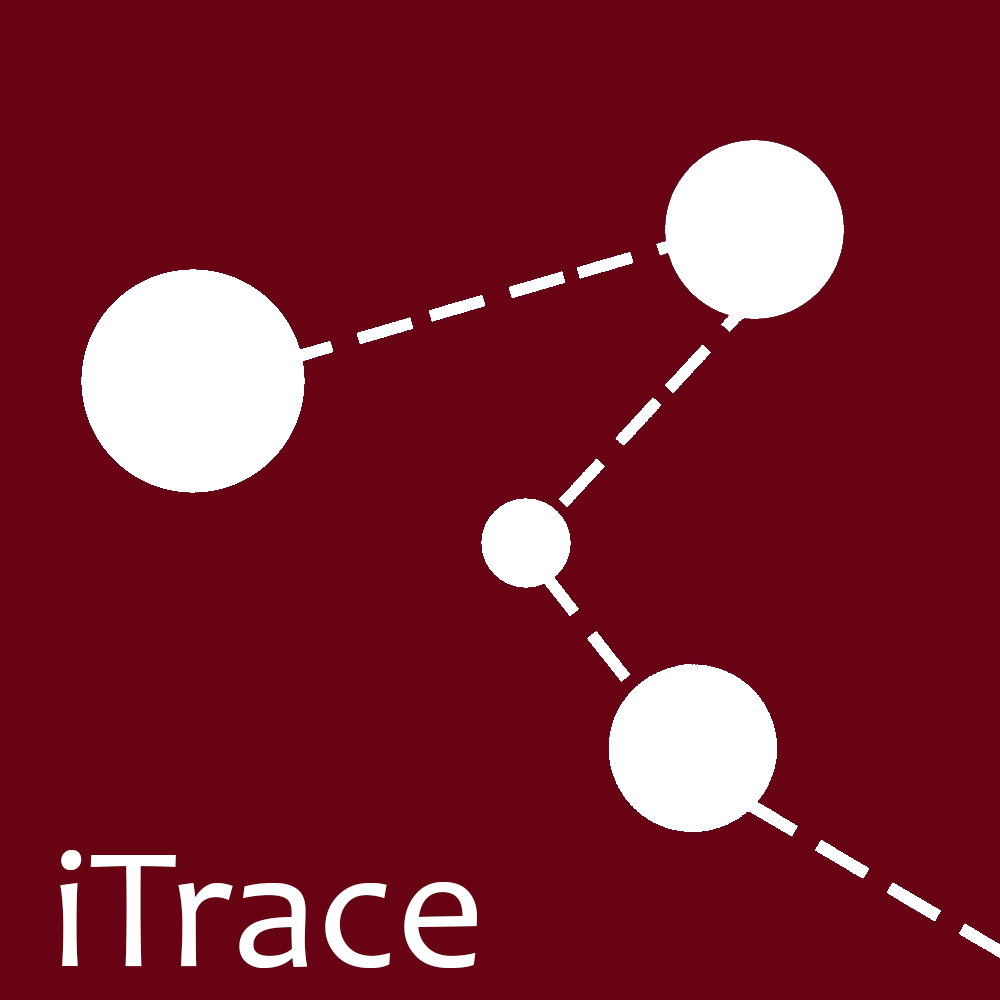
<style>
.page{position:relative;width:1000px;height:1000px;background:#680314}
.page>*{position:absolute;margin:0}
.t1{font:174px "Candara";color:#ffffff}
</style>
<div class="page">
<p class="t1" style="left:60px;top:850px;width:417px;height:118px">iTrace</p>
</div>
